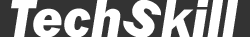
<style>
.page{position:relative;width:250px;height:37px;background:#ffffff}
.page>*{position:absolute;margin:0}
.t1{font:56.1px "FranklinGothic-HeavyItalic";color:#ffffff;scale:0.94 1}
</style>
<div class="page">
<p class="t1" style="left:11px;top:0px;width:227px;height:38px">Tech   kill</p>
<p class="t1" style="left:123px;top:0px;width:38px;height:38px;rotate:21deg">S</p>
</div>
